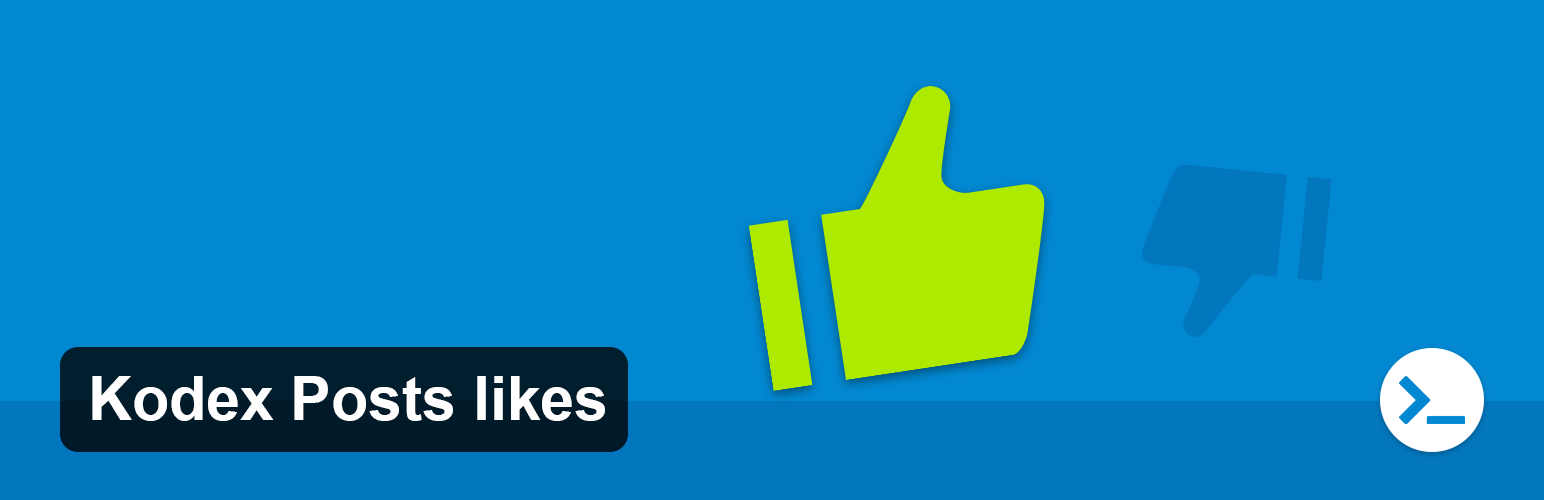
<style>
.page{position:relative;width:1544px;height:500px;background:#0288d1}
.page>*{position:absolute;margin:0}
.t1{font:60.8px "Arial-BoldMT";color:#ffffff}
</style>
<div class="page">
<p class="t1" style="left:92px;top:376px;width:513px;height:45px">Kodex Posts likes</p>
</div>
